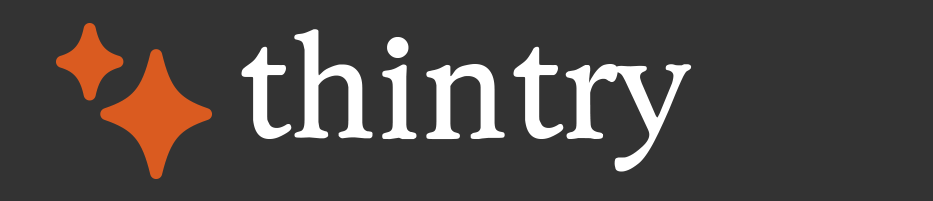
<style>
.page{position:relative;width:933px;height:201px;background:#333333}
.page>*{position:absolute;margin:0}
.t1{font:145.8px "Stratford-Regular";letter-spacing:0.02em;color:#ffffff}
</style>
<div class="page">
<p class="t1" style="left:241px;top:29px;width:451px;height:143px">thintry</p>
</div>
